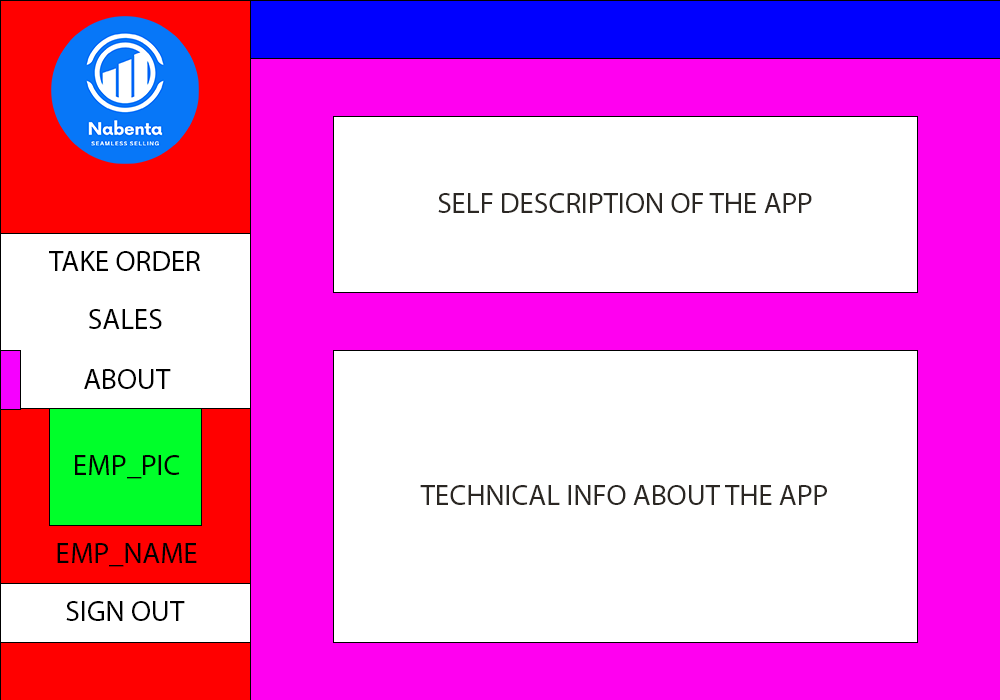
<style>
.page{position:relative;width:1000px;height:700px;background:#ffffff}
.page>*{position:absolute;margin:0}
.t1{font:29.2px "MyriadPro-Regular";color:#2b2723;text-transform:uppercase}
.t2{font:29.2px "MyriadPro-Regular";color:#000000;text-transform:uppercase}
</style>
<div class="page">
<p class="t1" style="left:438px;top:193px;width:374px;height:20px">self description of the app</p>
<p class="t2" style="left:49px;top:251px;width:152px;height:20px">take order</p>
<p class="t2" style="left:89px;top:309px;width:73px;height:20px">sales</p>
<p class="t2" style="left:84px;top:369px;width:87px;height:20px">about</p>
<p class="t2" style="left:75px;top:455px;width:105px;height:24px">emp_pic</p>
<p class="t1" style="left:420px;top:485px;width:407px;height:20px">technical info about the app</p>
<p class="t2" style="left:57px;top:543px;width:140px;height:24px">emp_name</p>
<p class="t2" style="left:66px;top:601px;width:119px;height:20px">Sign out</p>
</div>
